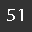
<style>
.page{position:relative;width:32px;height:32px;background:#333333}
.page>*{position:absolute;margin:0}
.t1{font:17.8px "MyriadPro-Regular";color:#ffffff;scale:1.12 1}
</style>
<div class="page">
<p class="t1" style="left:7px;top:9px;width:16px;height:12px">51</p>
</div>
